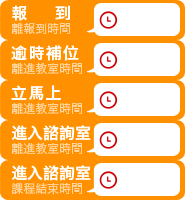
<style>
.page{position:relative;width:185px;height:200px;background:#ff9000}
.page>*{position:absolute;margin:0}
.t1{font:16px "HiraginoSansGB-W6";letter-spacing:0.08em;color:#ffffff}
.t2{font:12px "HiraginoSansGB-W3";color:#ffd399}
.t3{font:16px "HiraginoSansGB-W6";color:#ffffff}
</style>
<div class="page">
<p class="t1" style="left:12px;top:5px;width:58px;height:16px">報    到</p>
<p class="t2" style="left:12px;top:22px;width:58px;height:13px">離報到時間</p>
<p class="t1" style="left:11px;top:45px;width:68px;height:16px">逾時補位</p>
<p class="t2" style="left:12px;top:62px;width:70px;height:13px">離進教室時間</p>
<p class="t1" style="left:11px;top:85px;width:50px;height:16px">立馬上</p>
<p class="t2" style="left:12px;top:102px;width:70px;height:13px">離進教室時間</p>
<p class="t3" style="left:11px;top:125px;width:80px;height:16px">進入諮詢室</p>
<p class="t2" style="left:12px;top:142px;width:70px;height:13px">離進教室時間</p>
<p class="t3" style="left:11px;top:165px;width:80px;height:16px">進入諮詢室</p>
<p class="t2" style="left:11px;top:182px;width:71px;height:13px">課程結束時間</p>
</div>
